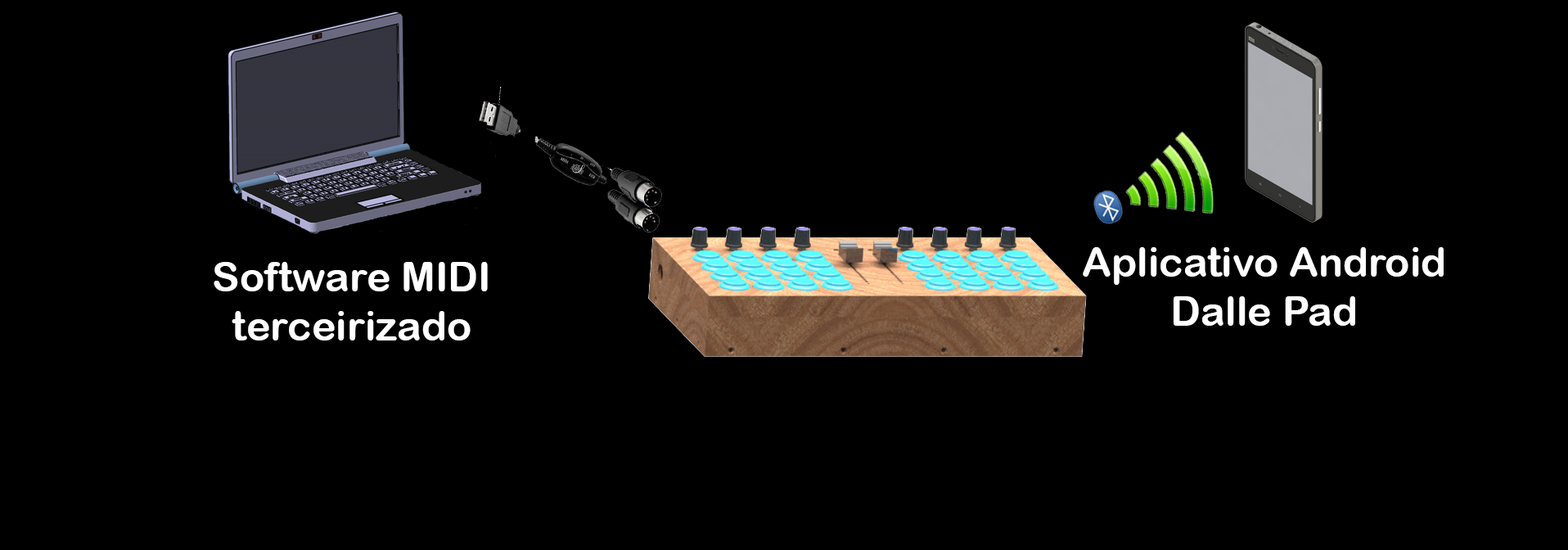
<style>
.page{position:relative;width:1568px;height:550px;background:#000000}
.page>*{position:absolute;margin:0}
.t1{font:40.9px "ArialRoundedMTBold";color:#ffffff}
</style>
<div class="page">
<p class="t1" style="left:1083px;top:247px;width:361px;height:79px;text-align:center">Aplicativo Android<br>Dalle Pad</p>
<p class="t1" style="left:214px;top:262px;width:274px;height:78px;text-align:center">Software MIDI<br>terceirizado</p>
</div>
